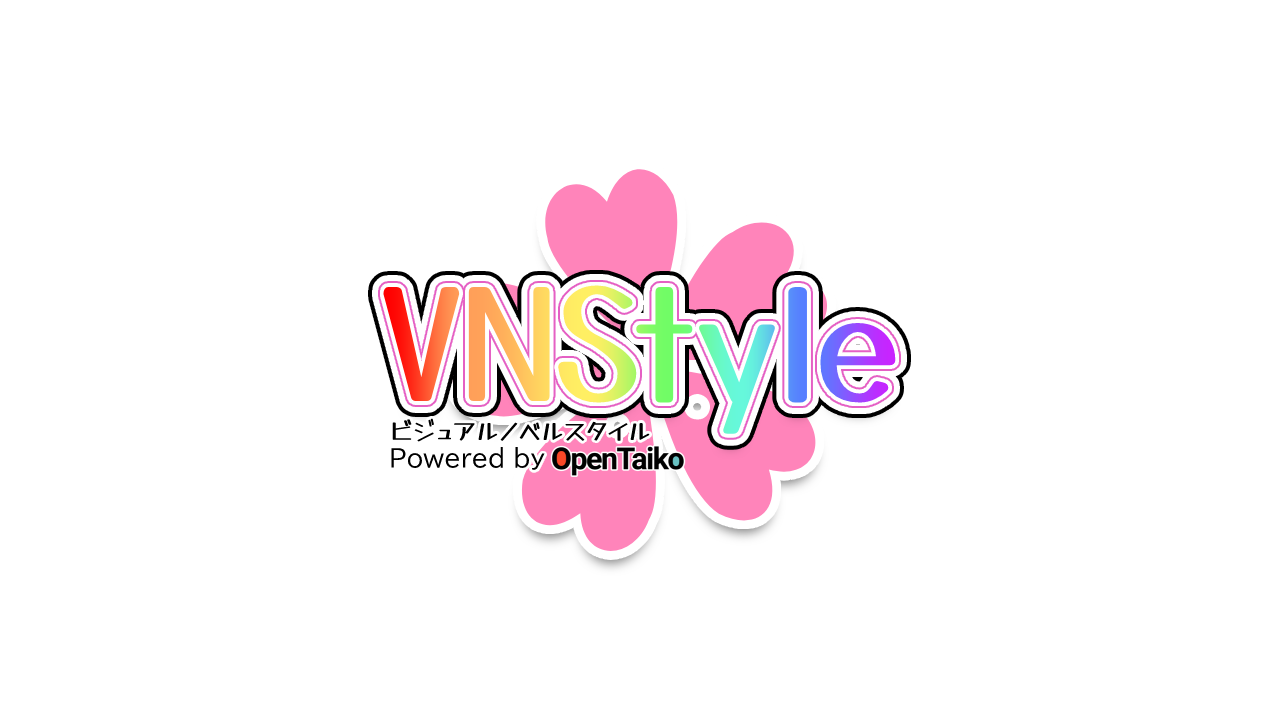
<style>
.page{position:relative;width:1280px;height:720px;background:#ffffff}
.page>*{position:absolute;margin:0}
.t1{font:150px "YuseiMagic-Regular"}
.t2{font:24px "YuseiMagic-Regular";color:#000000}
.t3{font:24px "BIZUDPGothic-Regular";color:#000000}
</style>
<div class="page">
<p class="t1" style="left:383px;top:285px;width:513px;height:149px">VNStyle</p>
<p class="t2" style="left:392px;top:418px;width:258px;height:24px">ビジュアルノベルスタイル</p>
<p class="t3" style="left:391px;top:447px;width:154px;height:23px">Powered by</p>
</div>
